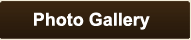
<style>
.page{position:relative;width:191px;height:40px}
.page>*{position:absolute;margin:0}
.t1{font:18px "Arial-BoldMT";color:#ffffff}
</style>
<div class="page">
<p class="t1" style="left:34px;top:12px;width:116px;height:18px">Photo Gallery</p>
</div>
